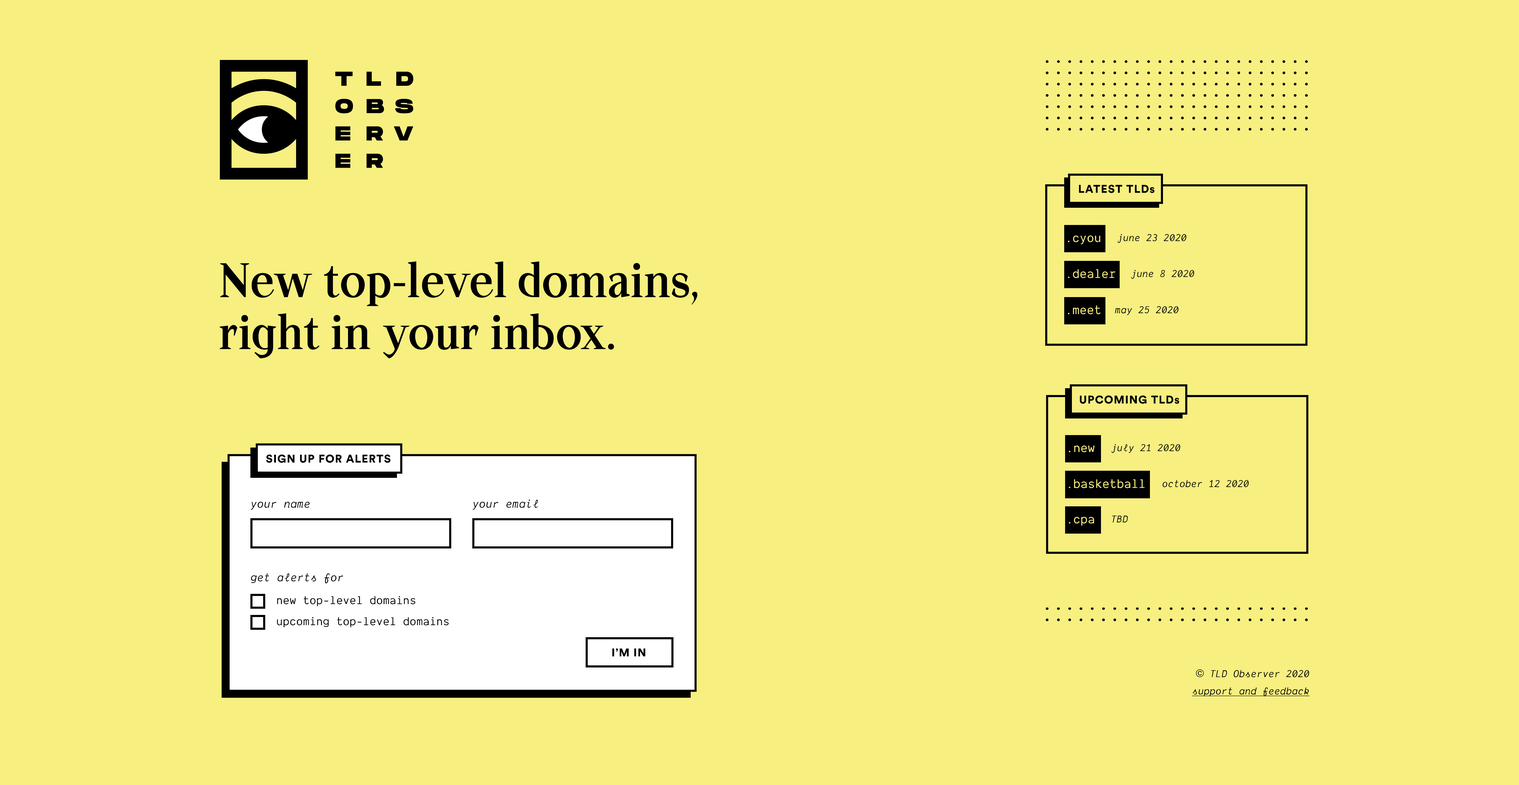
<style>
.page{position:relative;width:1519px;height:785px;background:#f7ef80}
.page>*{position:absolute;margin:0}
.t1{font:11.2px "CircularStd-Black";letter-spacing:0.05em;color:#000000}
.t2{font:10.5px "DankMono-Italic";color:#000000}
.t3{font:13.1px "DankMono-Regular";color:#f7ef80}
.t4{font:44.5px "ATApoc-Dark";color:#000000}
.t5{font:12.1px "DankMono-Italic";color:#000000}
.t6{font:12.1px "DankMono-Regular";color:#000000}
.t7{font:10.6px/18.3px "DankMono-Italic";color:#000000;text-decoration:underline}
.t8{font:10.6px/18.3px "Helvetica";color:#000000}
.t9{font:10.6px/18.3px "DankMono-Italic";color:#000000}
</style>
<div class="page">
<p class="t1" style="left:1079px;top:185px;width:76px;height:8px">LATEST TLDs</p>
<p class="t2" style="left:1118px;top:234px;width:69px;height:9px">june 23 2020</p>
<p class="t3" style="left:1068px;top:235px;width:33px;height:9px">.cyou</p>
<p class="t4" style="left:220px;top:261px;width:478px;height:97px">New top-level domains,<br>right in your inbox.</p>
<p class="t3" style="left:1068px;top:269px;width:48px;height:9px">.dealer</p>
<p class="t2" style="left:1131px;top:270px;width:63px;height:9px">june 8 2020</p>
<p class="t3" style="left:1068px;top:305px;width:33px;height:9px">.meet</p>
<p class="t2" style="left:1115px;top:306px;width:64px;height:9px">may 25 2020</p>
<p class="t1" style="left:1080px;top:395px;width:100px;height:9px">UPCOMING TLDs</p>
<p class="t3" style="left:1069px;top:445px;width:26px;height:7px">.new</p>
<p class="t2" style="left:1112px;top:444px;width:68px;height:9px">july 21 2020</p>
<p class="t1" style="left:266px;top:454px;width:125px;height:9px">SIGN UP FOR ALERTS</p>
<p class="t3" style="left:1069px;top:479px;width:76px;height:9px">.basketball</p>
<p class="t2" style="left:1163px;top:480px;width:86px;height:7px">october 12 2020</p>
<p class="t5" style="left:251px;top:501px;width:59px;height:9px">your name</p>
<p class="t5" style="left:473px;top:499px;width:65px;height:11px">your email</p>
<p class="t3" style="left:1069px;top:517px;width:25px;height:9px">.cpa</p>
<p class="t2" style="left:1112px;top:515px;width:16px;height:8px">TBD</p>
<p class="t5" style="left:251px;top:573px;width:92px;height:10px">get alerts for</p>
<p class="t6" style="left:277px;top:596px;width:138px;height:10px">new top-level domains</p>
<p class="t6" style="left:277px;top:617px;width:172px;height:10px">upcoming top-level domains</p>
<p class="t1" style="left:612px;top:648px;width:33px;height:8px">I’M IN</p>
<p class="t7" style="left:1192px;top:669px;width:118px;height:27px;text-align:right"><span class="t8">©</span><span class="t9"> TLD Observer 2020<br></span>support and feedback</p>
</div>
